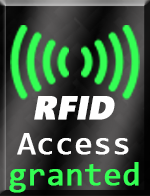
<style>
.page{position:relative;width:150px;height:196px}
.page>*{position:absolute;margin:0}
.t1{font:33px "SegoeUIBlack";color:#ffffff;font-weight:bold;font-style:italic}
.t2{font:33px "Consolas";color:#ffffff;font-weight:bold}
.t3{font:33px "Consolas";color:#34fe54;font-weight:bold}
</style>
<div class="page">
<p class="t1" style="left:34px;top:96px;width:81px;height:24px">RFID</p>
<p class="t2" style="left:17px;top:133px;width:112px;height:22px">Access</p>
<p class="t3" style="left:9px;top:162px;width:130px;height:31px">granted</p>
</div>
